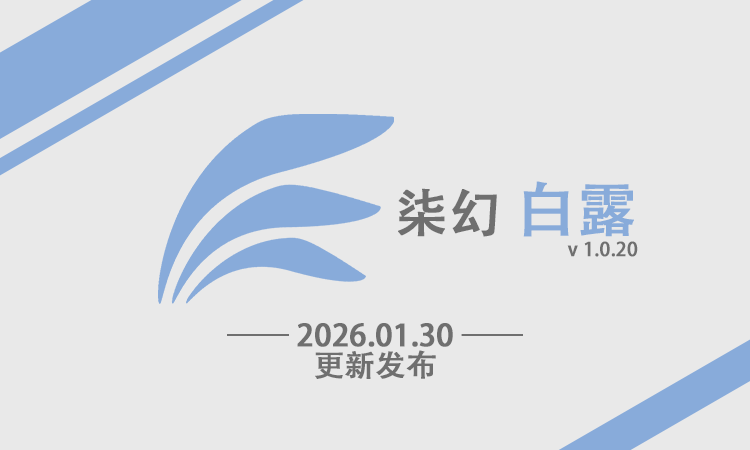
<style>
.page{position:relative;width:750px;height:450px;background:#e9e9e9}
.page>*{position:absolute;margin:0}
.t1{font:19px/60px "AdobeHeitiStd-Regular";color:#6f6f6f;font-weight:bold}
.t2{font:52px/60px "AdobeHeitiStd-Regular";color:#6f6f6f;font-weight:bold}
.t3{font:60px/60px "AdobeHeitiStd-Regular";color:#88abda;font-weight:bold}
.t4{font:30px/30px "AdobeHeitiStd-Regular";color:#6f6f6f;font-weight:bold}
</style>
<div class="page">
<p class="t1" style="left:398px;top:181px;width:240px;height:76px;text-align:right"><span class="t2">柒幻 </span><span class="t3">白露<br></span>v 1.0.20</p>
<p class="t4" style="left:227px;top:323px;width:296px;height:56px;text-align:center">—— 2026.01.30 ——<br>更新发布</p>
</div>
